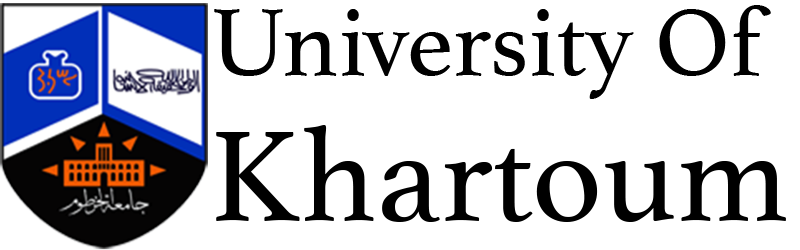
<style>
.page{position:relative;width:800px;height:250px;background:#ffffff}
.page>*{position:absolute;margin:0}
.t1{font:100px "Athelas-Regular";color:#000000}
.t2{font:135px "Athelas-Regular";color:#000000}
</style>
<div class="page">
<p class="t1" style="left:214px;top:5px;width:557px;height:94px">University Of</p>
<p class="t2" style="left:216px;top:125px;width:570px;height:97px">Khartoum</p>
</div>
